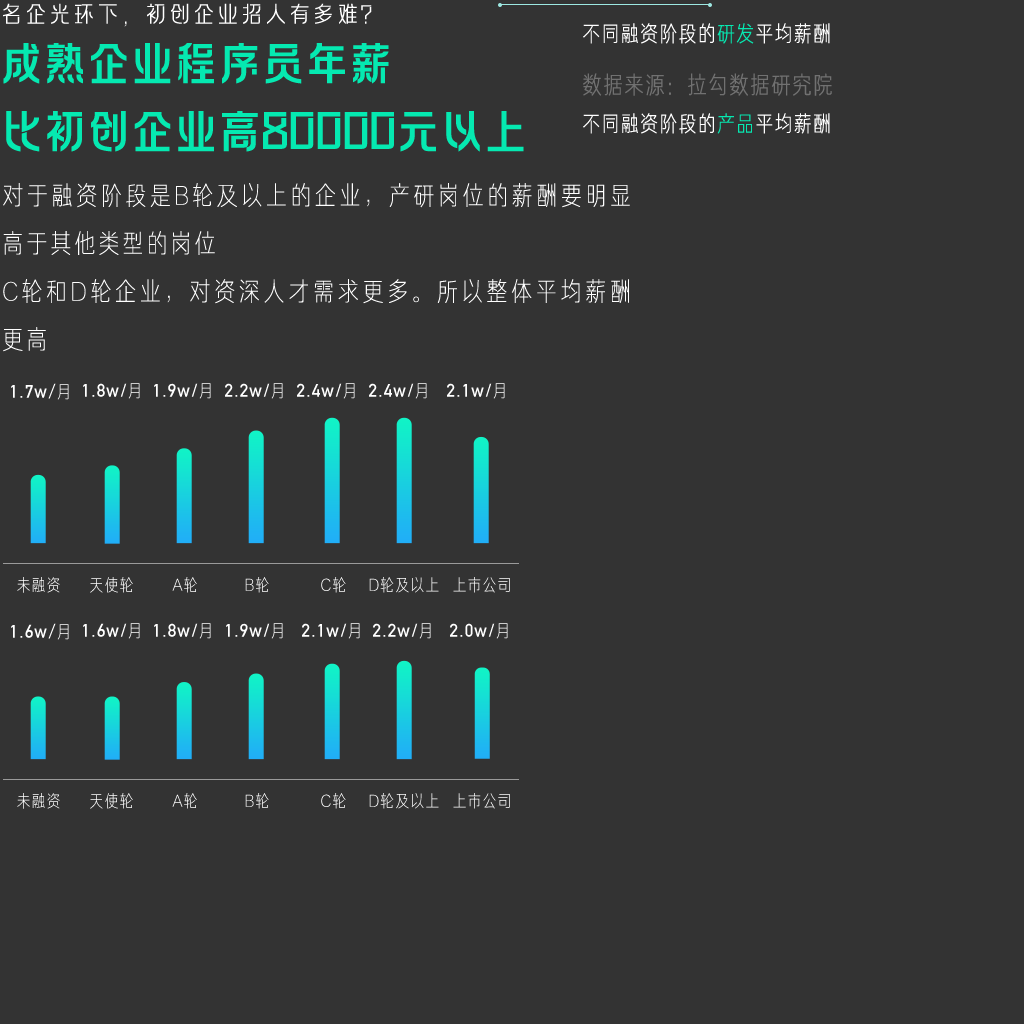
<style>
.page{position:relative;width:1024px;height:1024px;background:#333333}
.page>*{position:absolute;margin:0}
.t1{font:24px "FZLAGBTTS_XI--GB1-0";color:#ffffff;text-transform:uppercase}
.t2{font:22px "FZJUNH_XIJW--GB1-0";letter-spacing:0.05em;color:#ffffff;text-transform:uppercase}
.t3{font:22px "FZJUNH_XIJW--GB1-0";letter-spacing:0.05em;color:#05e9b1;text-transform:uppercase}
.t4{font:48px/34px "FZLAGBTTS_ZHONG--GB1-0";letter-spacing:-0.09em;color:#05e9b1;text-transform:uppercase}
.t5{font:24px "FZJUNH_XIJW--GB1-0";letter-spacing:0.05em;color:#717171;text-transform:uppercase}
.t6{font:26px/48px "FZJUNH_XIANJW--GB1-0";letter-spacing:0.1em;color:#ffffff}
.t7{font:18px "DINAlternate-Bold";letter-spacing:0.06em;color:#ffffff}
.t8{font:18px "KozGoPr6N-Regular";letter-spacing:0.06em;color:#ffffff}
.t9{font:18px "FZJUNH_XIJW--GB1-0";letter-spacing:0.06em;color:#ffffff}
.t10{font:17px "FZJUNH_XIJW--GB1-0";letter-spacing:0.06em;color:#ffffff}
.t11{font:17px "FZJUNH_XIJW--GB1-0";letter-spacing:0.06em}
</style>
<div class="page">
<p class="t1" style="left:3px;top:3px;width:369px;height:24px">名企光环下，初创企业招人有多难？</p>
<p class="t2" style="left:583px;top:23px;width:247px;height:21px">不同融资阶段的<span class="t3">研发</span>平均薪酬</p>
<p class="t4" style="left:3px;top:43px;width:521px;height:109px">成熟企业程序员年薪<br><br>比初创企业高80000元以上</p>
<p class="t5" style="left:583px;top:73px;width:249px;height:23px">数据来源：拉勾数据研究院</p>
<p class="t2" style="left:583px;top:113px;width:247px;height:21px">不同融资阶段的<span class="t3">产品</span>平均薪酬</p>
<p class="t6" style="left:3px;top:183px;width:627px;height:169px;text-align:justify">对于融资阶段是B轮及以上的企业，产研岗位的薪酬要明显高于其他类型的岗位<br>C轮和D轮企业，对资深人才需求更多。所以整体平均薪酬更高</p>
<p class="t7" style="left:11px;top:383px;width:58px;height:17px">1.7w<span class="t8">/</span><span class="t9">月</span></p>
<p class="t7" style="left:83px;top:383px;width:57px;height:16px">1.8w/<span class="t9">月</span></p>
<p class="t7" style="left:154px;top:383px;width:57px;height:16px">1.9w/<span class="t9">月</span></p>
<p class="t7" style="left:225px;top:383px;width:58px;height:16px">2.2w/<span class="t9">月</span></p>
<p class="t7" style="left:297px;top:383px;width:58px;height:16px">2.4w/<span class="t9">月</span></p>
<p class="t7" style="left:369px;top:383px;width:58px;height:16px">2.4w/<span class="t9">月</span></p>
<p class="t7" style="left:447px;top:383px;width:58px;height:16px">2.1w/<span class="t9">月</span></p>
<p class="t10" style="left:17px;top:577px;width:43px;height:16px">未融资</p>
<p class="t11" style="left:90px;top:577px;width:43px;height:16px">天使轮</p>
<p class="t10" style="left:172px;top:577px;width:25px;height:16px">A轮</p>
<p class="t11" style="left:245px;top:577px;width:24px;height:16px">B轮</p>
<p class="t11" style="left:321px;top:577px;width:25px;height:16px">C轮</p>
<p class="t10" style="left:369px;top:577px;width:70px;height:16px">D轮及以上</p>
<p class="t11" style="left:453px;top:577px;width:57px;height:16px">上市公司</p>
<p class="t7" style="left:11px;top:623px;width:58px;height:17px">1.6w<span class="t8">/</span><span class="t9">月</span></p>
<p class="t7" style="left:83px;top:623px;width:57px;height:16px">1.6w/<span class="t9">月</span></p>
<p class="t7" style="left:154px;top:623px;width:57px;height:16px">1.8w/<span class="t9">月</span></p>
<p class="t7" style="left:226px;top:623px;width:57px;height:16px">1.9w/<span class="t9">月</span></p>
<p class="t7" style="left:302px;top:623px;width:58px;height:16px">2.1w/<span class="t9">月</span></p>
<p class="t7" style="left:373px;top:623px;width:58px;height:16px">2.2w/<span class="t9">月</span></p>
<p class="t7" style="left:450px;top:623px;width:58px;height:16px">2.0w/<span class="t9">月</span></p>
<p class="t10" style="left:17px;top:793px;width:43px;height:16px">未融资</p>
<p class="t11" style="left:90px;top:793px;width:43px;height:16px">天使轮</p>
<p class="t10" style="left:172px;top:793px;width:25px;height:16px">A轮</p>
<p class="t11" style="left:245px;top:793px;width:24px;height:16px">B轮</p>
<p class="t11" style="left:321px;top:793px;width:25px;height:16px">C轮</p>
<p class="t10" style="left:369px;top:793px;width:70px;height:16px">D轮及以上</p>
<p class="t11" style="left:453px;top:793px;width:57px;height:16px">上市公司</p>
</div>
